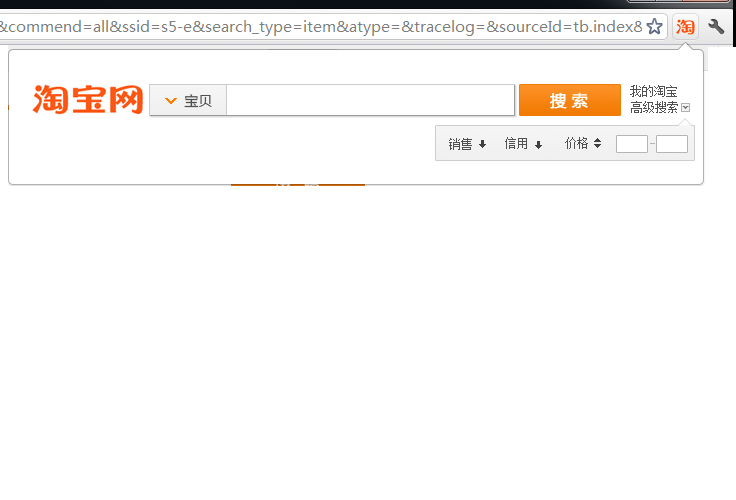
<style>
.page{position:relative;width:736px;height:500px;background:#ffffff}
.page>*{position:absolute;margin:0}
.t1{font:12px "SimSun";color:#505050}
.t2{font:14px "MicrosoftYaHei";color:#505050}
</style>
<div class="page">
<p class="t1" style="left:630px;top:85px;width:47px;height:12px">我的淘宝</p>
<p class="t2" style="left:184px;top:94px;width:28px;height:14px">宝贝</p>
<p class="t1" style="left:631px;top:101px;width:47px;height:12px">高级搜索</p>
<p class="t1" style="left:505px;top:137px;width:22px;height:12px">信用</p>
<p class="t1" style="left:565px;top:137px;width:23px;height:12px">价格</p>
<p class="t1" style="left:449px;top:138px;width:23px;height:12px">销售</p>
</div>
